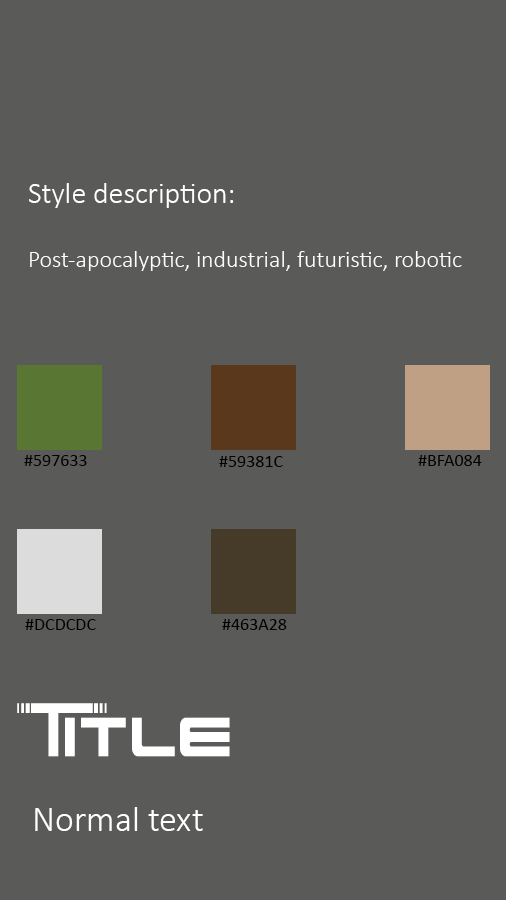
<style>
.page{position:relative;width:506px;height:900px;background:#5a5a58}
.page>*{position:absolute;margin:0}
.t1{font:24px "Calibri-Light";color:#ffffff}
.t2{font:30px "Calibri-Light";color:#ffffff}
.t3{font:18px "Calibri";color:#000000}
.t4{font:36px "StarsFightersUpright";color:#ffffff}
.t5{font:36px "Calibri-Light";color:#ffffff}
</style>
<div class="page">
<p class="t1" style="left:29px;top:183px;width:433px;height:88px"><span class="t2">Style description:<br><br></span>Post-apocalyptic, industrial, futuristic, robotic</p>
<p class="t3" style="left:24px;top:455px;width:63px;height:11px">#597633</p>
<p class="t3" style="left:219px;top:456px;width:64px;height:11px">#59381C</p>
<p class="t3" style="left:418px;top:455px;width:64px;height:11px">#BFA084</p>
<p class="t3" style="left:25px;top:619px;width:71px;height:11px">#DCDCDC</p>
<p class="t3" style="left:222px;top:619px;width:65px;height:11px">#463A28</p>
<p class="t4" style="left:17px;top:703px;width:213px;height:54px">Title</p>
<p class="t5" style="left:35px;top:807px;width:168px;height:24px">Normal text</p>
</div>
